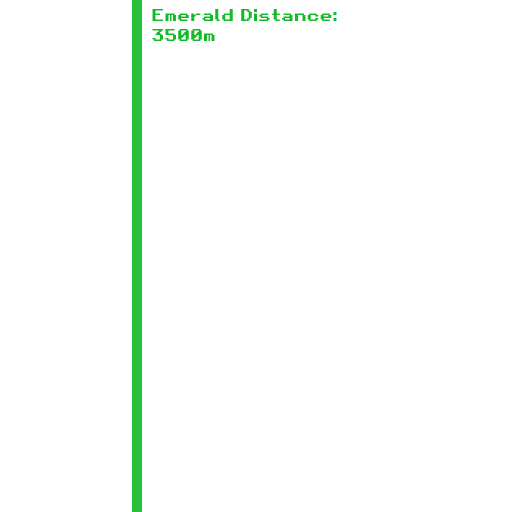
<style>
.page{position:relative;width:512px;height:512px;background:#ffffff}
.page>*{position:absolute;margin:0}
.t1{font:16.7px "RetroGaming";color:#11ba27}
</style>
<div class="page">
<p class="t1" style="left:152px;top:9px;width:185px;height:32px">Emerald Distance:<br>3500m</p>
</div>
